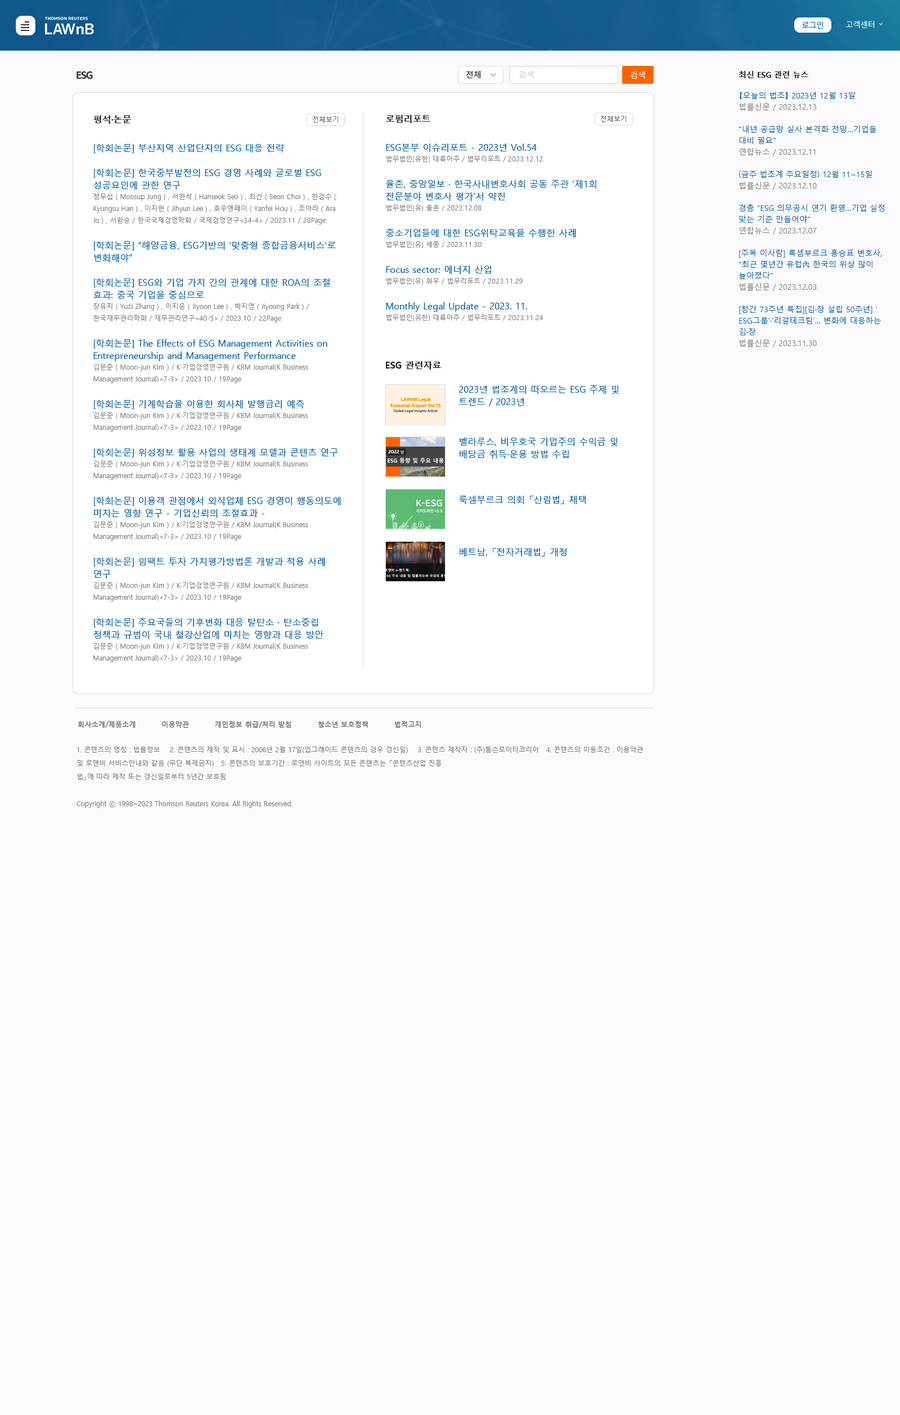
<style>
.page{position:relative;width:900px;height:1415px;background:#f8fafc}
.page>*{position:absolute;margin:0}
.t1{font:10.1px "MalgunGothicBold";letter-spacing:-0.06em;color:#333333}
.t2{font:7.9px "MalgunGothic";color:#212121}
.t3{font:7.9px "MalgunGothic";color:#cccccc}
.t4{font:7.9px "MalgunGothic";color:#ffffff}
.t5{font:7.9px "MalgunGothicBold";color:#212121}
.t6{font:7.9px/11.2px "MalgunGothic";color:#005da2}
.t7{font:7.9px/11.2px "MalgunGothic";color:#7f7f7f}
.t8{font:9px "MalgunGothicBold";color:#212121}
.t9{font:6.8px "MalgunGothic";color:#7f7f7f}
.t10{font:9px/12.4px "MalgunGothic";color:#005da2}
.t11{font:9px "MalgunGothic";color:#005da2}
.t12{font:6.8px "MalgunGothic";color:#7f7f7f;font-weight:bold}
.t13{font:6.8px/13.5px "MalgunGothic";color:#7f7f7f}
</style>
<div class="page">
<p class="t1" style="left:76px;top:71px;width:17px;height:8px">ESG</p>
<p class="t2" style="left:466px;top:71px;width:15px;height:7px">전체</p>
<p class="t3" style="left:519px;top:71px;width:15px;height:7px">검색</p>
<p class="t4" style="left:631px;top:71px;width:14px;height:8px">검색</p>
<p class="t5" style="left:739px;top:71px;width:69px;height:7px">최신 ESG 관련 뉴스​</p>
<p class="t6" style="left:739px;top:92px;width:145px;height:255px">【오늘의 법조】 2023년 12월 13일 <br><span class="t7">법률신문 / 2023.12.13<br><br></span>"내년 공급망 실사 본격화 전망…기업들 대비 필요" <br><span class="t7">연합뉴스 / 2023.12.11<br></span><br>(금주 법조계 주요일정) 12월 11~15일 <span class="t7">법률신문 / 2023.12.10<br></span><br>경총 "ESG 의무공시 연기 환영…기업 실정 맞는 기준 만들어야" <br><span class="t7">연합뉴스 / 2023.12.07<br></span><br>[주목 이사람] 룩셈부르크 홍승표 변호사, “최근 몇년간 유럽內 한국의 위상 많이 높아졌다” <br><span class="t7">법률신문 / 2023.12.03<br><br></span>[창간 73주년 특집][김·장 설립 50주년] ‘ESG그룹’·‘리걸테크팀’… 변화에 대응하는 김·장 <br><span class="t7">법률신문 / 2023.11.30</span></p>
<p class="t8" style="left:93px;top:115px;width:38px;height:9px">평석·논문</p>
<p class="t8" style="left:386px;top:115px;width:44px;height:8px">로펌리포트</p>
<p class="t9" style="left:93px;top:144px;width:248px;height:518px"><span class="t10">[학회논문] 부산지역 산업단지의 ESG 대응 전략<br><br>[학회논문] 한국중부발전의 ESG 경영 사례와 글로벌 ESG 성공요인에 관한 연구<br></span>정무섭 ( Moosup Jung ) , 서한석 ( Hanseok Seo ) , 최선 ( Seon Choi ) , 한경수 ( Kyungsu Han ) , 이지현 ( Jihyun Lee ) , 호우옌페이 ( Yanfei Hou ) , 조아라 ( Ara Jo ) , 서환승 / 한국국제경영학회 / 국제경영연구&lt;34-4&gt; / 2023.11 / 28Page<br><span class="t10"><br>[학회논문] “해양금융, ESG기반의 ‘맞춤형 종합금융서비스’로 변화해야”<br><br>[학회논문] ESG와 기업 가치 간의 관계에 대한 ROA의 조절 효과: 중국 기업을 중심으로<br></span>장유지 ( Yuzi Zhang ) , 이지윤 ( Jiyoon Lee ) , 박지영 ( Jiyoung Park ) / 한국재무관리학회 / 재무관리연구&lt;40-5&gt; / 2023.10 / 22Page<br><span class="t10"><br>[학회논문] The Effects of ESG Management Activities on Entrepreneurship and Management Performance<br></span>김문준 ( Moon-jun Kim ) / K·기업경영연구원 / KBM Journal(K Business Management Journal)&lt;7-3&gt; / 2023.10 / 19Page<br><span class="t10"><br>[학회논문] 기계학습을 이용한 회사채 발행금리 예측<br></span>김문준 ( Moon-jun Kim ) / K·기업경영연구원 / KBM Journal(K Business Management Journal)&lt;7-3&gt; / 2023.10 / 19Page<br><span class="t10"><br>[학회논문] 위성정보 활용 사업의 생태계 모델과 콘텐츠 연구<br></span>김문준 ( Moon-jun Kim ) / K·기업경영연구원 / KBM Journal(K Business Management Journal)&lt;7-3&gt; / 2023.10 / 19Page<br><span class="t10"><br>[학회논문] 이용객 관점에서 외식업체 ESG 경영이 행동의도에 미치는 영향 연구 - 기업신뢰의 조절효과 -<br></span>김문준 ( Moon-jun Kim ) / K·기업경영연구원 / KBM Journal(K Business Management Journal)&lt;7-3&gt; / 2023.10 / 19Page<br><span class="t10"><br>[학회논문] 임팩트 투자 가치평가방법론 개발과 적용 사례 연구<br></span>김문준 ( Moon-jun Kim ) / K·기업경영연구원 / KBM Journal(K Business Management Journal)&lt;7-3&gt; / 2023.10 / 19Page<br><span class="t10"><br>[학회논문] 주요국들의 기후변화 대응 탈탄소 · 탄소중립 정책과 규범이 국내 철강산업에 미치는 영향과 대응 방안<br></span>김문준 ( Moon-jun Kim ) / K·기업경영연구원 / KBM Journal(K Business Management Journal)&lt;7-3&gt; / 2023.10 / 19Page</p>
<p class="t10" style="left:386px;top:143px;width:210px;height:178px">ESG본부 이슈리포트 - 2023년 Vol.54<br><span class="t9">법무법인(유한) 대륙아주 / 법무리포트 / 2023.12.12<br></span><br>율촌, 중앙일보 · 한국사내변호사회 공동 주관 ‘제1회 전문분야 변호사 평가’서 약진<br><span class="t9">법무법인(유) 율촌 / 2023.12.08<br></span><br>중소기업들에 대한 ESG위탁교육을 수행한 사례<br><span class="t9">법무법인(유) 세종 / 2023.11.30<br></span><br>Focus sector: 에너지 산업<br><span class="t9">법무법인(유) 화우 / 법무리포트 / 2023.11.29<br></span><br>Monthly Legal Update - 2023. 11.<br><span class="t9">법무법인(유한) 대륙아주 / 법무리포트 / 2023.11.24</span></p>
<p class="t8" style="left:386px;top:361px;width:55px;height:9px">ESG 관련자료</p>
<p class="t10" style="left:459px;top:385px;width:160px;height:21px">2023년 법조계의 떠오르는 ESG 주제 및 트렌드 / 2023년</p>
<p class="t10" style="left:460px;top:438px;width:158px;height:20px">벨라루스, 비우호국 기업주의 수익금 및 배당금 취득·운용 방법 수립</p>
<p class="t11" style="left:459px;top:496px;width:127px;height:8px">룩셈부르크 의회 「산림법」 채택</p>
<p class="t11" style="left:460px;top:548px;width:107px;height:8px">베트남, 「전자거래법」 개정</p>
<p class="t12" style="left:78px;top:721px;width:343px;height:7px">회사소개/제품소개          이용약관          개인정보 취급/처리 방침          청소년 보호정책          법적고지</p>
<p class="t13" style="left:76px;top:746px;width:568px;height:62px">1. 콘텐츠의 명칭 : 법률정보    2. 콘텐츠의 제작 및 표시 : 2006년 2월 17일(업그레이드 콘텐츠의 경우 갱신일)    3. 콘텐츠 제작자 : (주)톰슨로이터코리아   4. 콘텐츠의 이용조건 : 이용약관 <br>및 로앤비 서비스안내와 같음 (무단 복제금지)   5. 콘텐츠의 보호기간 : 로앤비 사이트의 모든 콘텐츠는 「콘텐츠산업 진흥<br>법」에 따라 제작 또는 갱신일로부터 5년간 보호됨<br><br>Copyright ⓒ 1998~2023 Thomson Reuters Korea. All Rights Reserved.</p>
</div>
